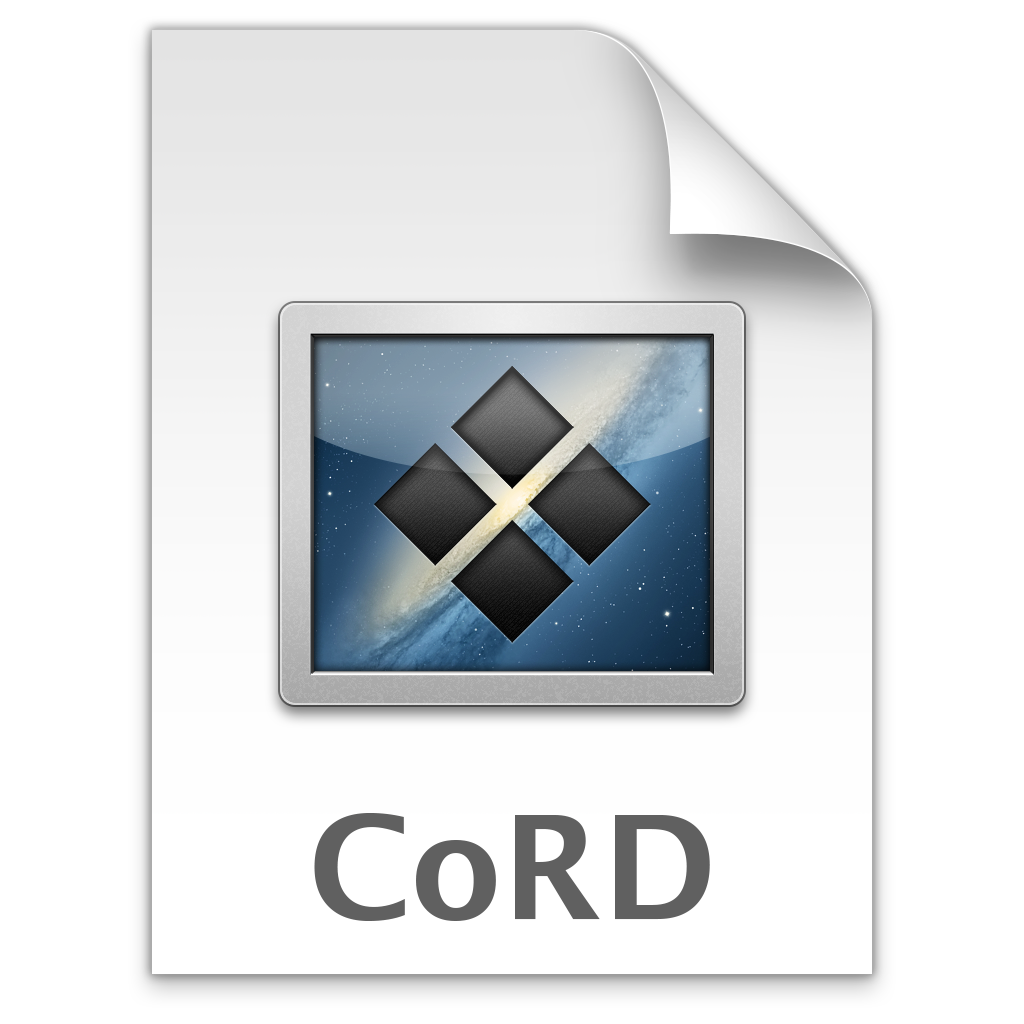
<style>
.page{position:relative;width:1024px;height:1024px;background:#ffffff}
.page>*{position:absolute;margin:0}
.t1{font:144px "LucidaGrande-Bold";color:#606060}
</style>
<div class="page">
<p class="t1" style="left:314px;top:813px;width:396px;height:108px">CoRD</p>
</div>
